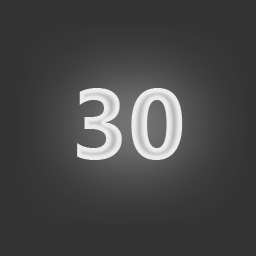
<style>
.page{position:relative;width:256px;height:256px;background:#333333}
.page>*{position:absolute;margin:0}
.t1{font:100px "MicrosoftTaiLe-Bold";color:#ebebeb}
</style>
<div class="page">
<p class="t1" style="left:77px;top:88px;width:106px;height:72px">30</p>
</div>
